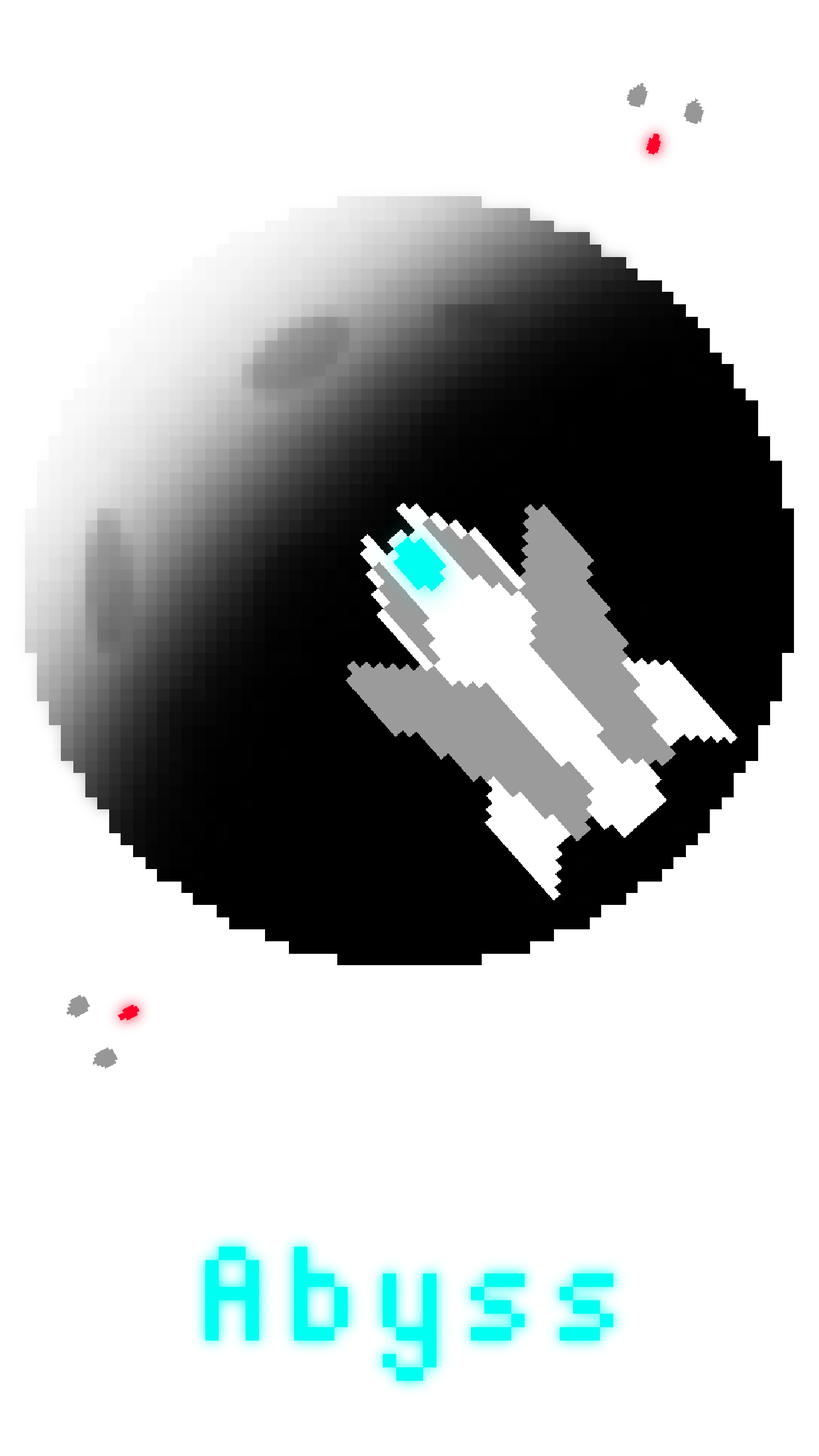
<style>
.page{position:relative;width:819px;height:1456px;background:#ffffff}
.page>*{position:absolute;margin:0}
.t1{font:214.6px "Thintel";letter-spacing:0.1em;color:#00fff2}
</style>
<div class="page">
<p class="t1" style="left:205px;top:1246px;width:409px;height:135px">Abyss</p>
</div>
